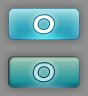
<style>
.page{position:relative;width:88px;height:96px}
.page>*{position:absolute;margin:0}
.t1{font:24px "DFMaruMoji-W9-WING-RKSJ-H";color:#ffffff;font-weight:bold}
.t2{font:24px "DFMaruMoji-W9-WING-RKSJ-H";color:#b5e3e9;font-weight:bold}
</style>
<div class="page">
<p class="t1" style="left:33px;top:15px;width:21px;height:19px">0</p>
<p class="t2" style="left:33px;top:63px;width:21px;height:19px">0</p>
</div>
